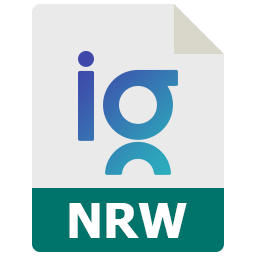
<style>
.page{position:relative;width:256px;height:256px;background:#eaeaea}
.page>*{position:absolute;margin:0}
.t1{font:48px "Tahoma-Bold";color:#ffffff}
</style>
<div class="page">
<p class="t1" style="left:69px;top:203px;width:118px;height:35px">NRW</p>
</div>
